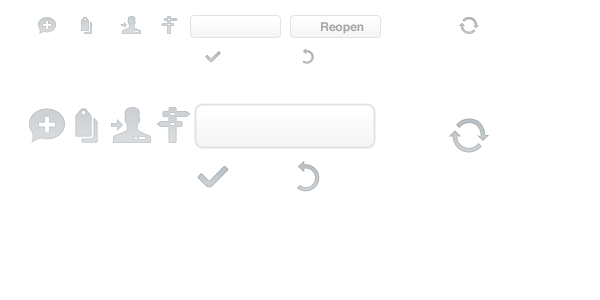
<style>
.page{position:relative;width:600px;height:300px;background:#ffffff}
.page>*{position:absolute;margin:0}
.t1{font:12px "Helvetica-Bold";color:#a5a5a5}
</style>
<div class="page">
<p class="t1" style="left:321px;top:22px;width:43px;height:12px">Reopen</p>
</div>
